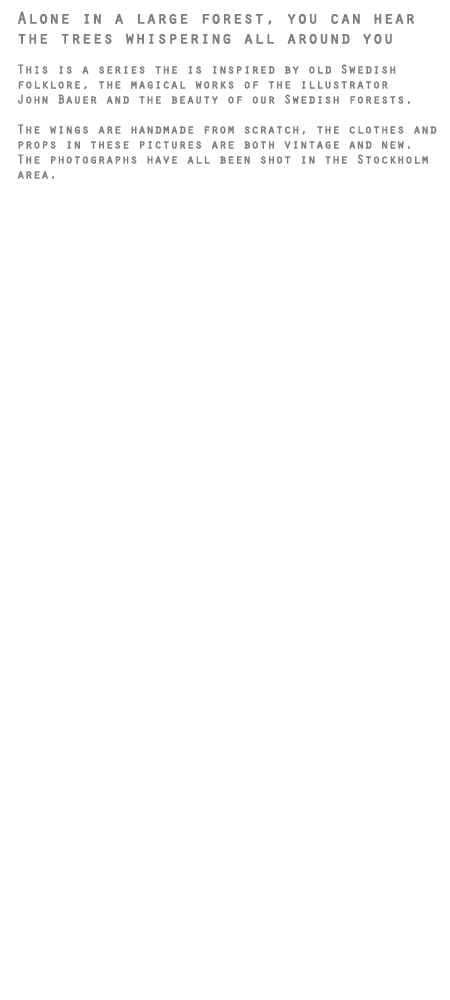
<style>
.page{position:relative;width:450px;height:1000px;background:#ffffff}
.page>*{position:absolute;margin:0}
.t1{font:12.5px "Orator-Regular";color:#7f7f7f;font-weight:bold}
.t2{font:16.7px "Orator-Regular";color:#7f7f7f;font-weight:bold}
</style>
<div class="page">
<p class="t1" style="left:17px;top:11px;width:420px;height:168px;text-align:right"><span class="t2">Alone in a large forest, you can hear<br>the trees whispering all around you <br></span><br>This is a series the is inspired by old Swedish<br>folklore, the magical works of the illustrator<br>John Bauer and the beauty of our Swedish forests.<br><br>The wings are handmade from scratch, the clothes and<br>props in these pictures are both vintage and new.<br>The photographs have all been shot in the Stockholm<br>area.</p>
</div>
